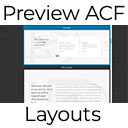
<style>
.page{position:relative;width:128px;height:128px;background:#ffffff}
.page>*{position:absolute;margin:0}
.t1{font:20px "Montserrat-Regular";color:#000000}
</style>
<div class="page">
<p class="t1" style="left:4px;top:5px;width:121px;height:16px">Preview ACF</p>
<p class="t1" style="left:26px;top:106px;width:75px;height:19px">Layouts</p>
</div>
